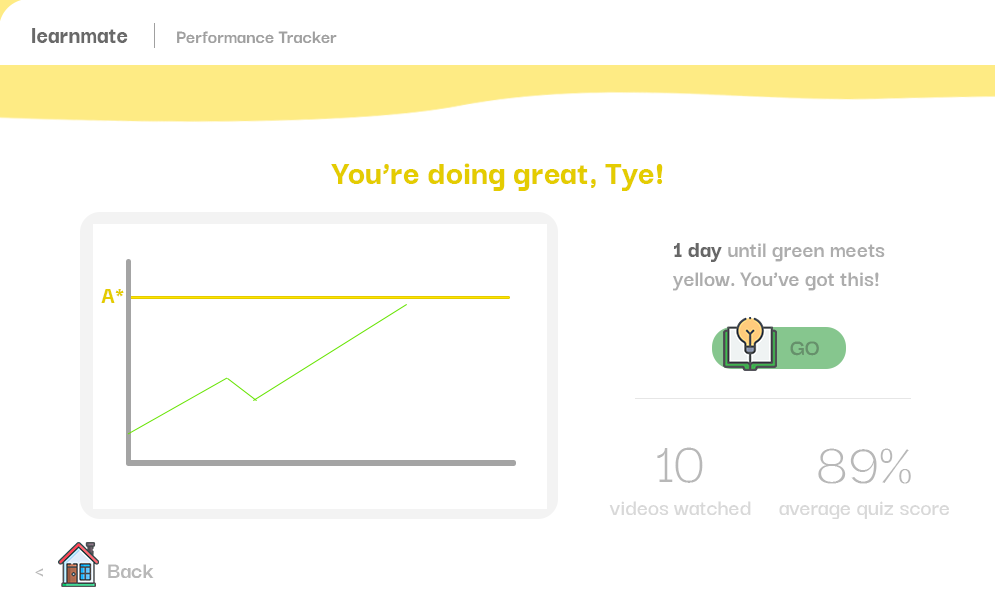
<style>
.page{position:relative;width:995px;height:608px;background:#ffffff}
.page>*{position:absolute;margin:0}
.t1{font:25px "DarkerGrotesque-ExtraBold";color:#696969}
.t2{font:20px "DarkerGrotesque-Bold";color:#a0a0a0}
.t3{font:36px "DarkerGrotesque-ExtraBold";color:#e4cc01}
.t4{font:24px "DarkerGrotesque-Bold";color:#adadad}
.t5{font:24px "DarkerGrotesque-ExtraBold";color:#676767}
.t6{font:24px "DarkerGrotesque-ExtraBold";color:#e4cc01}
.t7{font:24px "DarkerGrotesque-Bold";color:#66906b}
.t8{font:60px "DarkerGrotesque-Regular";color:#b8b8b8}
.t9{font:24px "DarkerGrotesque-SemiBold";color:#d8d8d8}
</style>
<div class="page">
<p class="t1" style="left:32px;top:28px;width:96px;height:15px">learnmate</p>
<p class="t2" style="left:177px;top:31px;width:160px;height:12px">Performance Tracker</p>
<p class="t3" style="left:331px;top:163px;width:332px;height:28px">You’re doing great, Tye!</p>
<p class="t4" style="left:673px;top:243px;width:212px;height:48px"><span class="t5">1 day</span> until green meets<br>yellow. You’ve got this!</p>
<p class="t6" style="left:101px;top:289px;width:23px;height:14px">A*</p>
<p class="t7" style="left:790px;top:341px;width:29px;height:15px">GO</p>
<p class="t8" style="left:657px;top:447px;width:46px;height:36px">10</p>
<p class="t8" style="left:818px;top:448px;width:93px;height:36px">89%</p>
<p class="t9" style="left:609px;top:501px;width:142px;height:14px">videos watched</p>
<p class="t9" style="left:779px;top:501px;width:170px;height:18px">average quiz score</p>
</div>
